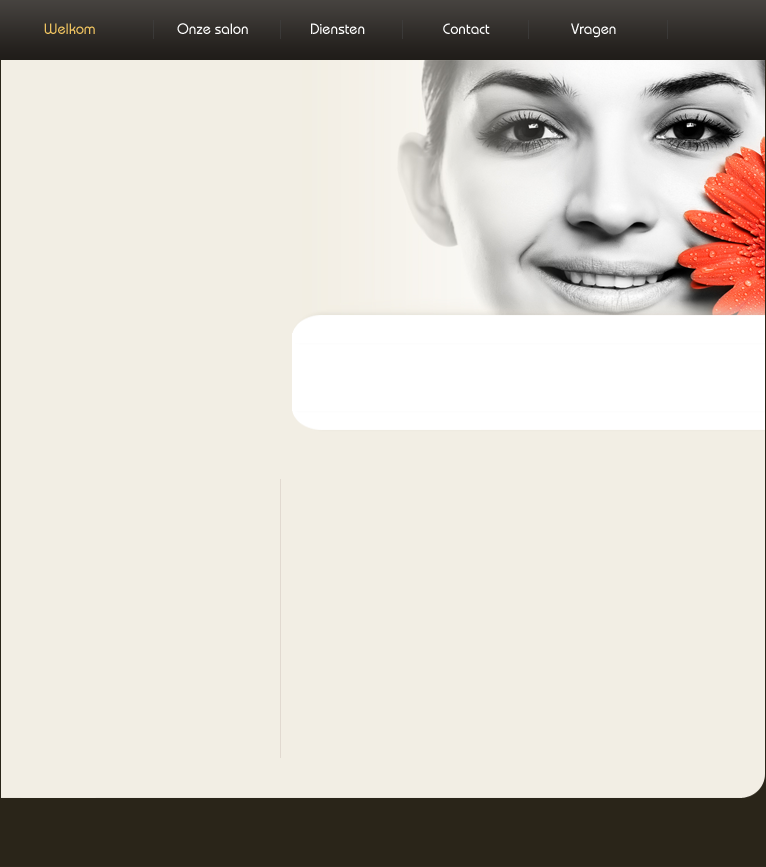
<style>
.page{position:relative;width:766px;height:867px;background:#f2eee4}
.page>*{position:absolute;margin:0}
.t1{font:15px "BauhausITCbyBT-Medium";color:#ffffff}
.t2{font:15px "BauhausITCbyBT-Medium";color:#efc360}
</style>
<div class="page">
<p class="t1" style="left:44px;top:23px;width:572px;height:15px"><span class="t2">Welkom</span>                    Onze salon               Diensten                   Contact                    Vragen</p>
</div>
